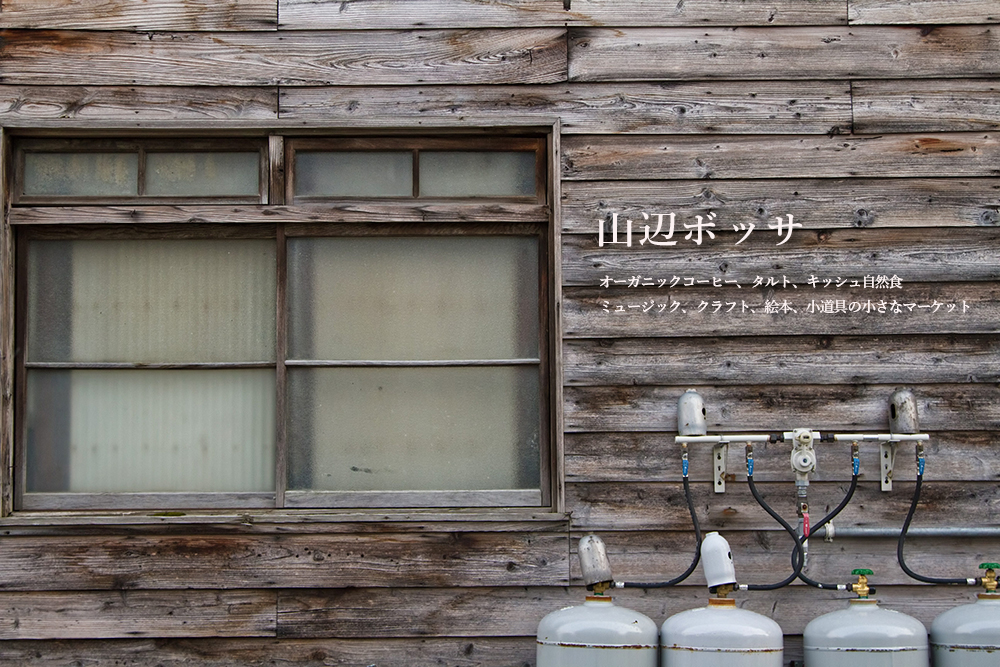
<style>
.page{position:relative;width:1000px;height:667px}
.page>*{position:absolute;margin:0}
.t1{font:39px "YuMin-Demibold";letter-spacing:0.05em;color:#fbf1f1;scale:1.04 1}
.t2{font:14.6px "YuMin-Demibold";letter-spacing:-0.09em;color:#fbf1f1;scale:1.04 1}
</style>
<div class="page">
<p class="t1" style="left:599px;top:212px;width:204px;height:35px">山辺ボッサ</p>
<p class="t2" style="left:600px;top:274px;width:370px;height:40px">オーガニックコーヒー、タルト、キッシュ自然食<br>ミュージック、クラフト、絵本、小道具の小さなマーケット</p>
</div>
